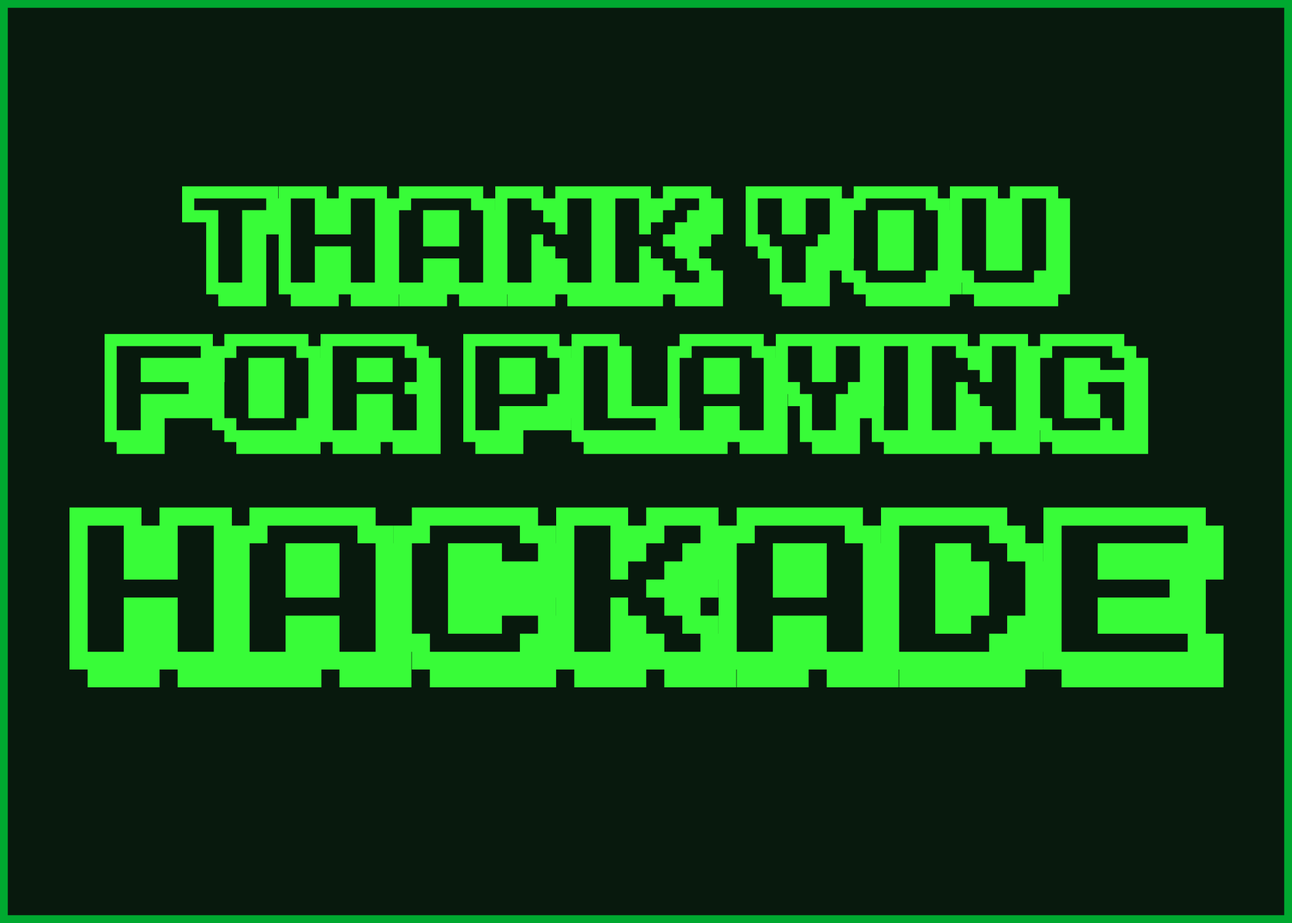
<style>
.page{position:relative;width:1292px;height:923px;background:#08190d}
.page>*{position:absolute;margin:0}
.t1{font:123.1px "KarmaticArcade";color:#38fc38}
.t2{font:184.6px "KarmaticArcade";color:#38fc38}
</style>
<div class="page">
<p class="t1" style="left:70px;top:186px;width:1154px;height:501px;text-align:center">Thank you <br>for Playing <br><span class="t2">HAckade</span></p>
</div>
